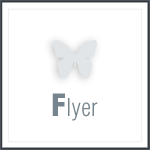
<style>
.page{position:relative;width:150px;height:150px;background:#ffffff}
.page>*{position:absolute;margin:0}
.t1{font:30px "Swiss721BT-BlackCondensed";color:#76858d}
.t2{font:24px "Swiss721BT-LightCondensed";color:#76858d}
</style>
<div class="page">
<p class="t1" style="left:52px;top:93px;width:13px;height:23px">F</p>
<p class="t2" style="left:68px;top:98px;width:30px;height:23px">lyer</p>
</div>
